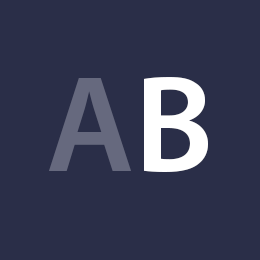
<style>
.page{position:relative;width:260px;height:260px;background:#2a2e48}
.page>*{position:absolute;margin:0}
.t1{font:138.6px "MyriadPro-Semibold";color:#66697e}
.t2{font:138.6px "MyriadPro-Semibold";color:#ffffff}
</style>
<div class="page">
<p class="t1" style="left:49px;top:77px;width:159px;height:95px">A<span class="t2">B</span></p>
</div>
